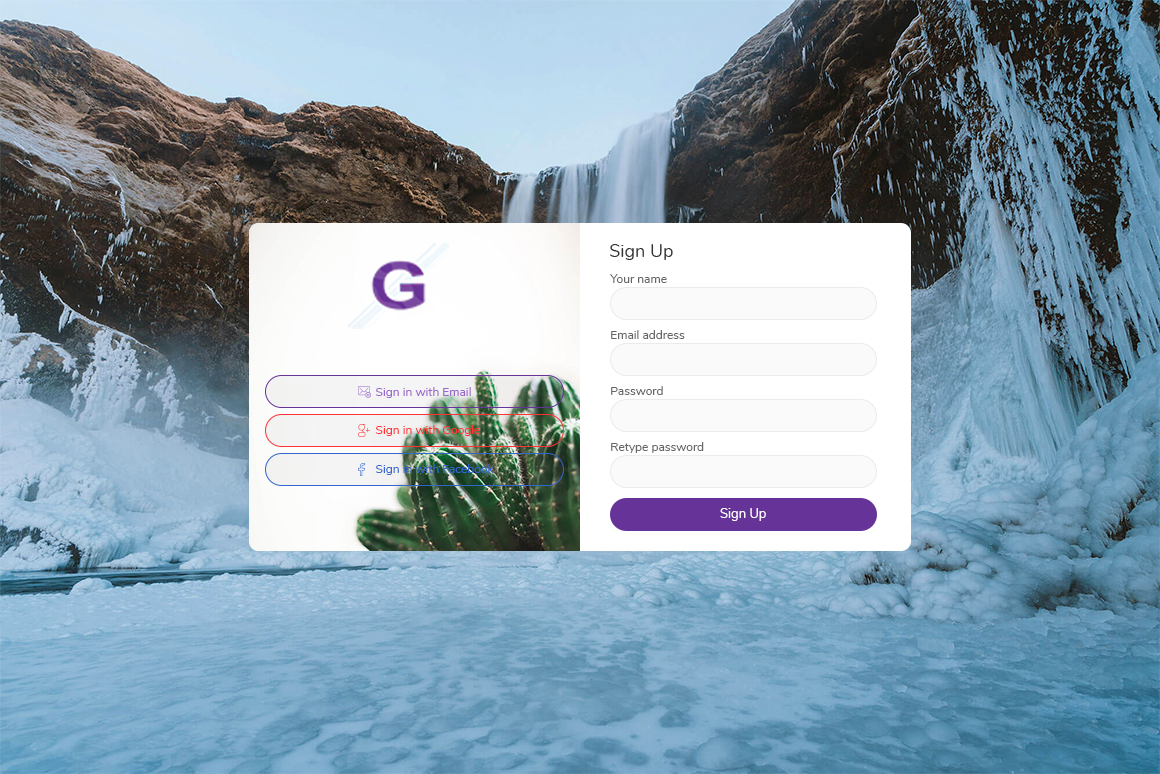
<style>
.page{position:relative;width:1160px;height:774px}
.page>*{position:absolute;margin:0}
.t1{font:18px "Nunito-Regular";color:#333333}
.t2{font:12px "Nunito-Regular";color:#666666}
.t3{font:12px "Nunito-Regular";color:#9966cc}
.t4{font:12px "Nunito-Regular";color:#ff3333}
.t5{font:12px "Nunito-Regular";color:#3366cc}
.t6{font:13px "Nunito-Regular";color:#ffffff}
</style>
<div class="page">
<p class="t1" style="left:610px;top:244px;width:63px;height:16px">Sign Up</p>
<p class="t2" style="left:610px;top:274px;width:57px;height:9px">Your name</p>
<p class="t2" style="left:611px;top:330px;width:74px;height:9px">Email address</p>
<p class="t3" style="left:375px;top:387px;width:96px;height:11px">Sign in with Email</p>
<p class="t2" style="left:611px;top:386px;width:52px;height:9px">Password</p>
<p class="t4" style="left:375px;top:425px;width:105px;height:11px">Sign in with Google</p>
<p class="t2" style="left:611px;top:442px;width:93px;height:11px">Retype password</p>
<p class="t5" style="left:375px;top:464px;width:119px;height:11px">Sign in with Facebook</p>
<p class="t6" style="left:720px;top:508px;width:46px;height:13px">Sign Up</p>
</div>
